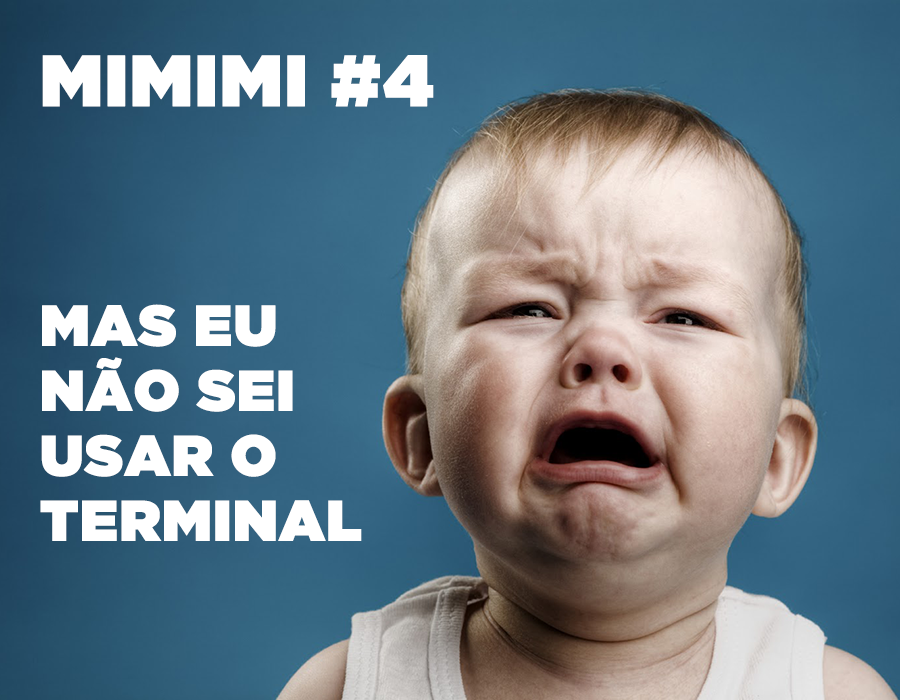
<style>
.page{position:relative;width:900px;height:700px}
.page>*{position:absolute;margin:0}
.t1{font:71.9px "GothamUltra";color:#ffffff;font-weight:bold}
.t2{font:57.2px/65px "GothamUltra";color:#ffffff;font-weight:bold}
</style>
<div class="page">
<p class="t1" style="left:42px;top:55px;width:392px;height:52px">MIMIMI #4</p>
<p class="t2" style="left:40px;top:304px;width:322px;height:237px">MAS EU <br>NÃO SEI <br>USAR O <br>TERMINAL</p>
</div>
